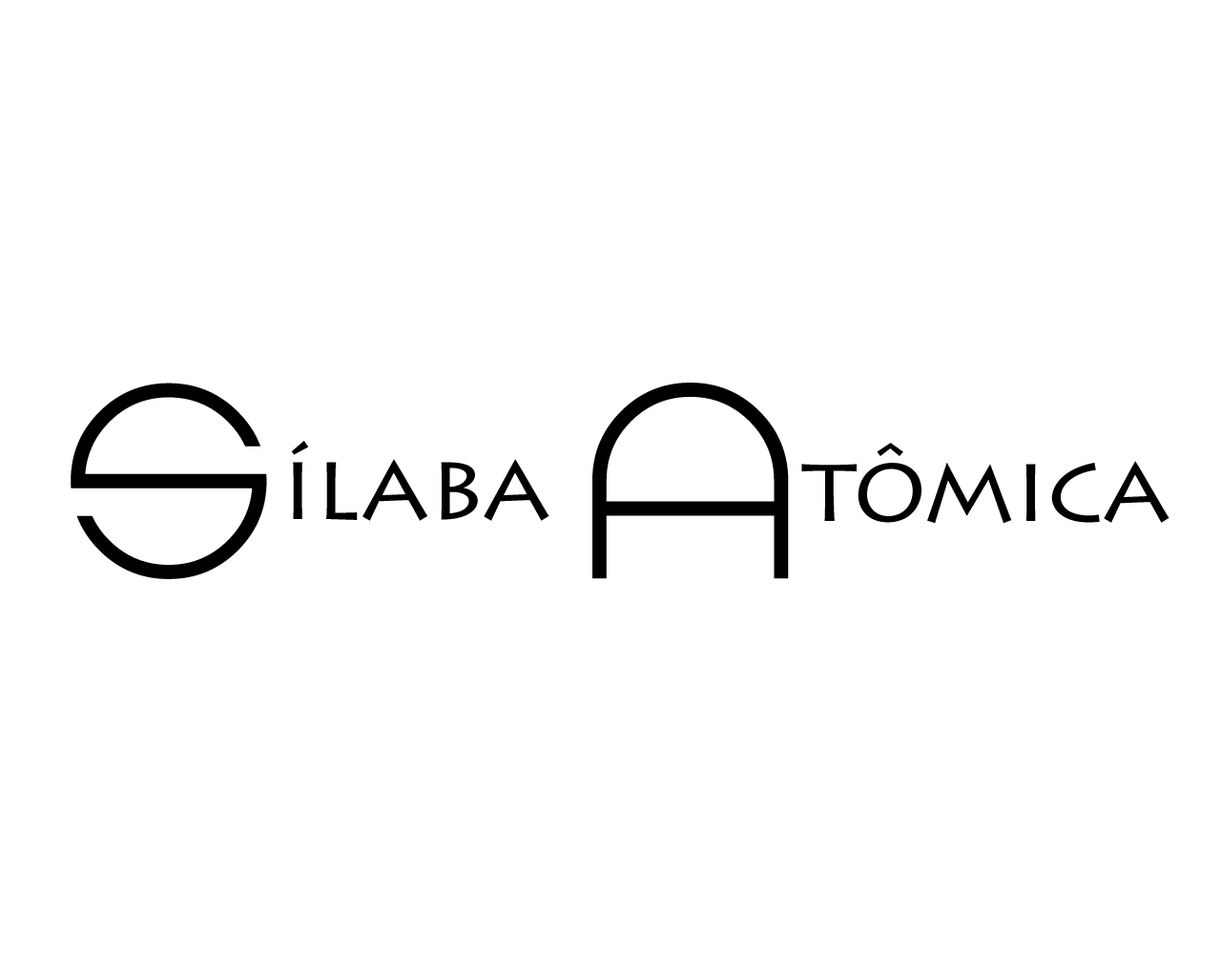
<style>
.page{position:relative;width:1221px;height:977px;background:#ffffff}
.page>*{position:absolute;margin:0}
.t1{font:286.1px "ZdykLibra";color:#000000}
.t2{font:95.4px "LithosPro-Regular";color:#000000}
</style>
<div class="page">
<p class="t1" style="left:71px;top:382px;width:196px;height:197px">S</p>
<p class="t1" style="left:592px;top:382px;width:197px;height:197px">A</p>
<p class="t2" style="left:291px;top:441px;width:258px;height:80px">ílaba</p>
<p class="t2" style="left:801px;top:443px;width:368px;height:81px">tômica</p>
</div>
